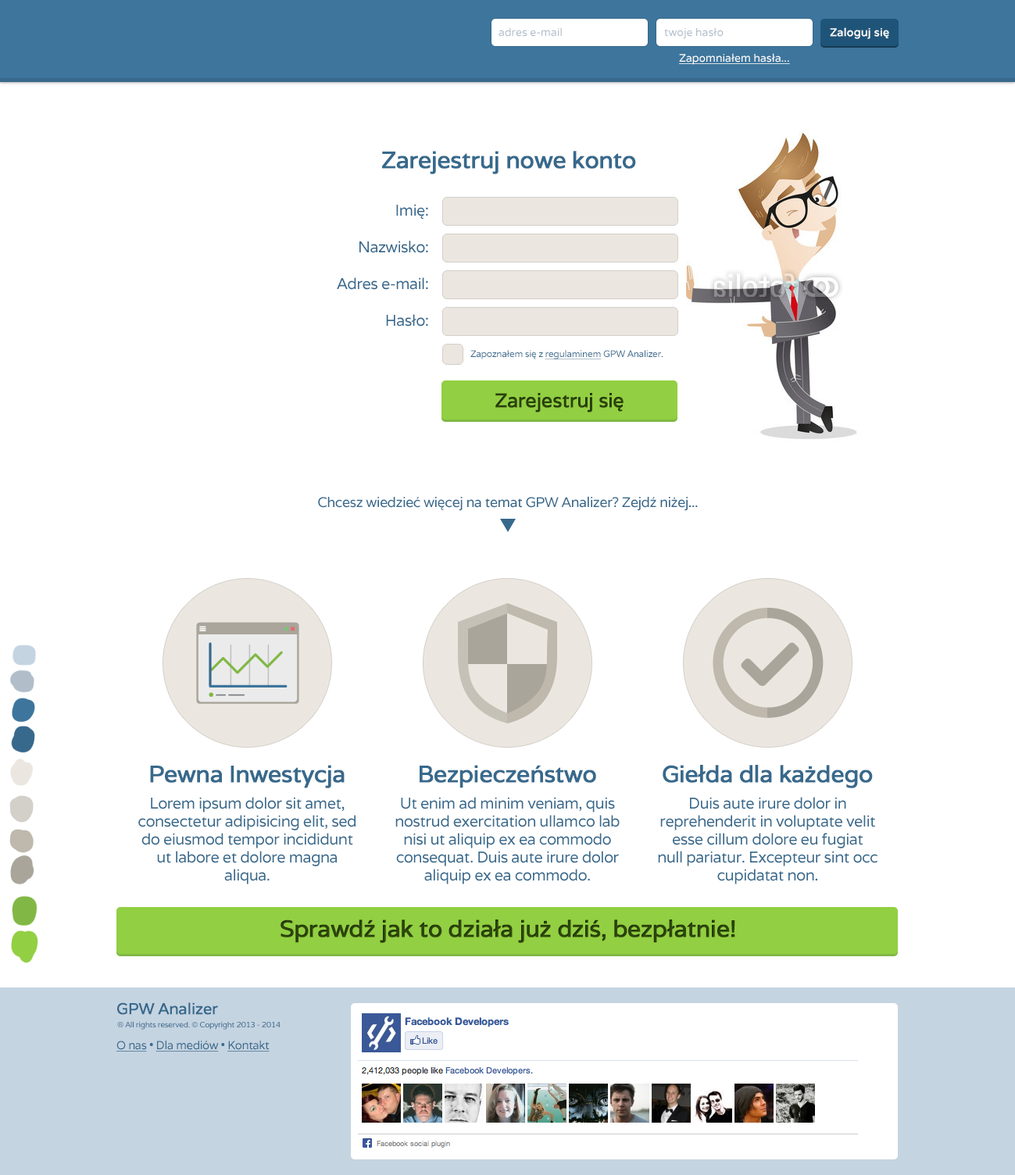
<style>
.page{position:relative;width:1015px;height:1175px;background:#ffffff}
.page>*{position:absolute;margin:0}
.t1{font:10.9px "Varela";color:#b1beca}
.t2{font:10.9px "Varela";color:#ffffff;font-weight:bold}
.t3{font:10.9px "Varela";color:#ffffff;text-decoration:underline}
.t4{font:23.4px "Varela";letter-spacing:-0.03em;color:#37698c;font-weight:bold}
.t5{font:15.6px "Varela";letter-spacing:-0.03em;color:#37698c}
.t6{font:9.4px "Varela";letter-spacing:-0.03em;color:#37698c}
.t7{font:9.4px "Varela";letter-spacing:-0.03em;color:#37698c;text-decoration:underline}
.t8{font:19.5px "Varela";letter-spacing:-0.03em;color:#2f4a0b;font-weight:bold}
.t9{font:14.1px "Varela";letter-spacing:-0.03em;color:#37698c}
.t10{font:15.6px/18px "Varela";letter-spacing:-0.03em;color:#37698c}
.t11{font:23.4px "Varela";letter-spacing:-0.03em;color:#2f4a0b;font-weight:bold}
.t12{font:15.6px "Varela";letter-spacing:-0.03em;color:#37698c;font-weight:bold}
.t13{font:7.8px "Varela";letter-spacing:-0.03em;color:#37698c}
.t14{font:11.7px "Varela";letter-spacing:-0.03em;color:#37698c;text-decoration:underline}
.t15{font:11.7px "Varela";letter-spacing:-0.03em;color:#37698c}
</style>
<div class="page">
<p class="t1" style="left:498px;top:27px;width:64px;height:10px">adres e-mail</p>
<p class="t1" style="left:664px;top:27px;width:59px;height:12px">twoje hasło</p>
<p class="t2" style="left:830px;top:27px;width:59px;height:12px">Zaloguj się</p>
<p class="t3" style="left:679px;top:53px;width:111px;height:12px">Zapomniałem hasła...</p>
<p class="t4" style="left:382px;top:151px;width:254px;height:23px">Zarejestruj nowe konto</p>
<p class="t5" style="left:396px;top:204px;width:32px;height:15px">Imię:</p>
<p class="t5" style="left:359px;top:241px;width:69px;height:12px">Nazwisko:</p>
<p class="t5" style="left:337px;top:277px;width:91px;height:13px">Adres e-mail:</p>
<p class="t5" style="left:386px;top:314px;width:42px;height:13px">Hasło:</p>
<p class="t6" style="left:470px;top:350px;width:192px;height:9px">Zapoznałem się z <span class="t7">regulaminem</span> GPW Analizer.</p>
<p class="t8" style="left:495px;top:393px;width:128px;height:19px">Zarejestruj się</p>
<p class="t9" style="left:318px;top:496px;width:380px;height:15px">Chcesz wiedzieć więcej na temat GPW Analizer? Zejdź niżej...</p>
<p class="t4" style="left:150px;top:765px;width:195px;height:23px">Pewna Inwestycja</p>
<p class="t4" style="left:420px;top:765px;width:176px;height:23px">Bezpieczeństwo</p>
<p class="t4" style="left:662px;top:765px;width:211px;height:23px">Giełda dla każdego</p>
<p class="t10" style="left:138px;top:797px;width:217px;height:87px;text-align:center">Lorem ipsum dolor sit amet, consectetur adipisicing elit, sed do eiusmod tempor incididunt ut labore et dolore magna aliqua.</p>
<p class="t10" style="left:395px;top:797px;width:225px;height:87px;text-align:center">Ut enim ad minim veniam, quis nostrud exercitation ullamco lab nisi ut aliquip ex ea commodo consequat. Duis aute irure dolor aliquip ex ea commodo.</p>
<p class="t10" style="left:658px;top:797px;width:219px;height:87px;text-align:center">Duis aute irure dolor in reprehenderit in voluptate velit esse cillum dolore eu fugiat <br>null pariatur. Excepteur sint occ cupidatat non.</p>
<p class="t11" style="left:280px;top:920px;width:455px;height:23px">Sprawdź jak to działa już dziś, bezpłatnie!</p>
<p class="t12" style="left:117px;top:1002px;width:101px;height:13px">GPW Analizer</p>
<p class="t13" style="left:117px;top:1021px;width:163px;height:9px">® All rights reserved. © Copyright 2013 - 2014</p>
<p class="t14" style="left:116px;top:1041px;width:154px;height:11px">O nas<span class="t15"> • </span>Dla mediów<span class="t15"> • </span>Kontakt</p>
</div>
